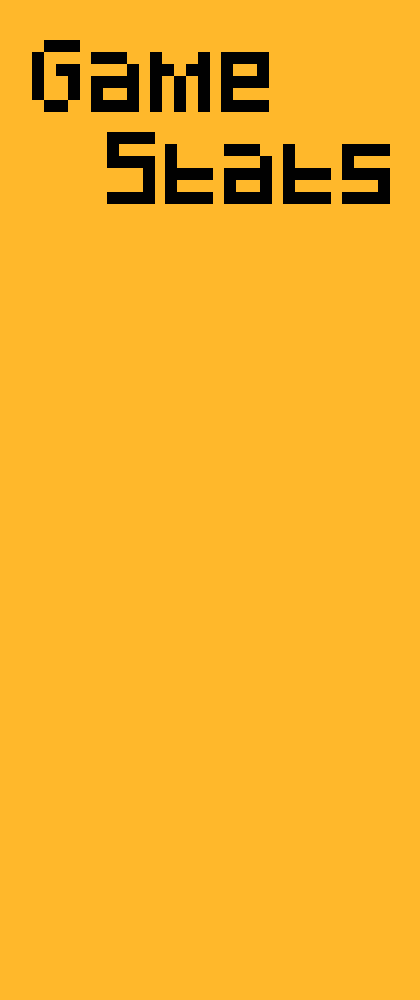
<style>
.page{position:relative;width:420px;height:1000px;background:#ffb82b}
.page>*{position:absolute;margin:0}
.t1{font:60px "Pixeled";letter-spacing:-0.02em;color:#010101}
</style>
<div class="page">
<p class="t1" style="left:32px;top:40px;width:237px;height:72px">Game</p>
<p class="t1" style="left:107px;top:132px;width:283px;height:72px">Stats</p>
</div>
